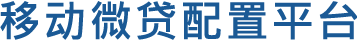
<style>
.page{position:relative;width:357px;height:42px;background:#ffffff}
.page>*{position:absolute;margin:0}
.t1{font:43px "MicrosoftJhengHeiBold";letter-spacing:0.059em;color:#1a5995}
</style>
<div class="page">
<p class="t1" style="left:0px;top:1px;width:358px;height:39px">移动微贷配置平台</p>
</div>
